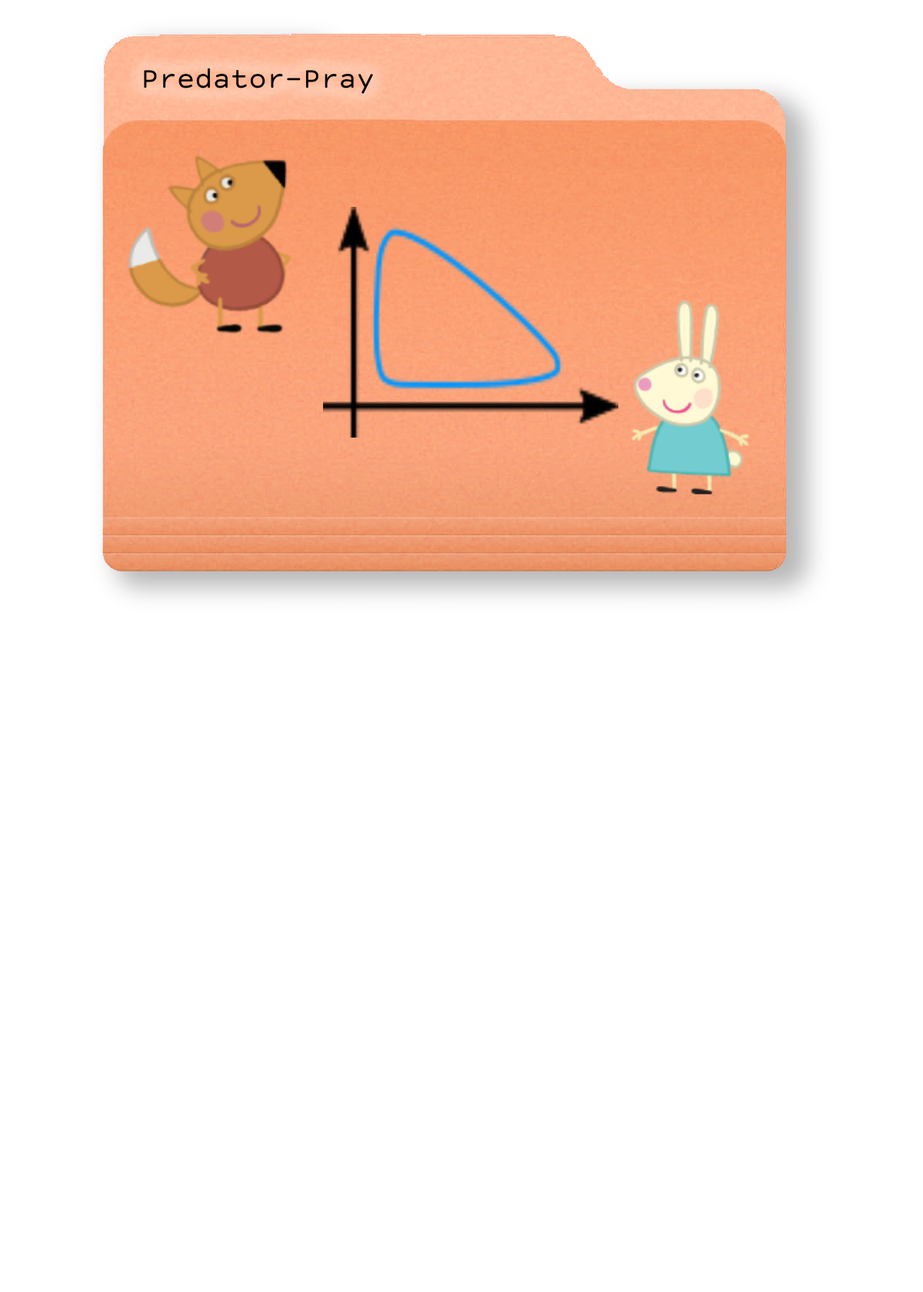
<style>
.page{position:relative;width:923px;height:1292px;background:#ffffff}
.page>*{position:absolute;margin:0}
.t1{font:30px "CourierPrimeSans-Regular";color:#000000}
</style>
<div class="page">
<p class="t1" style="left:144px;top:68px;width:229px;height:26px">Predator-Pray</p>
</div>
